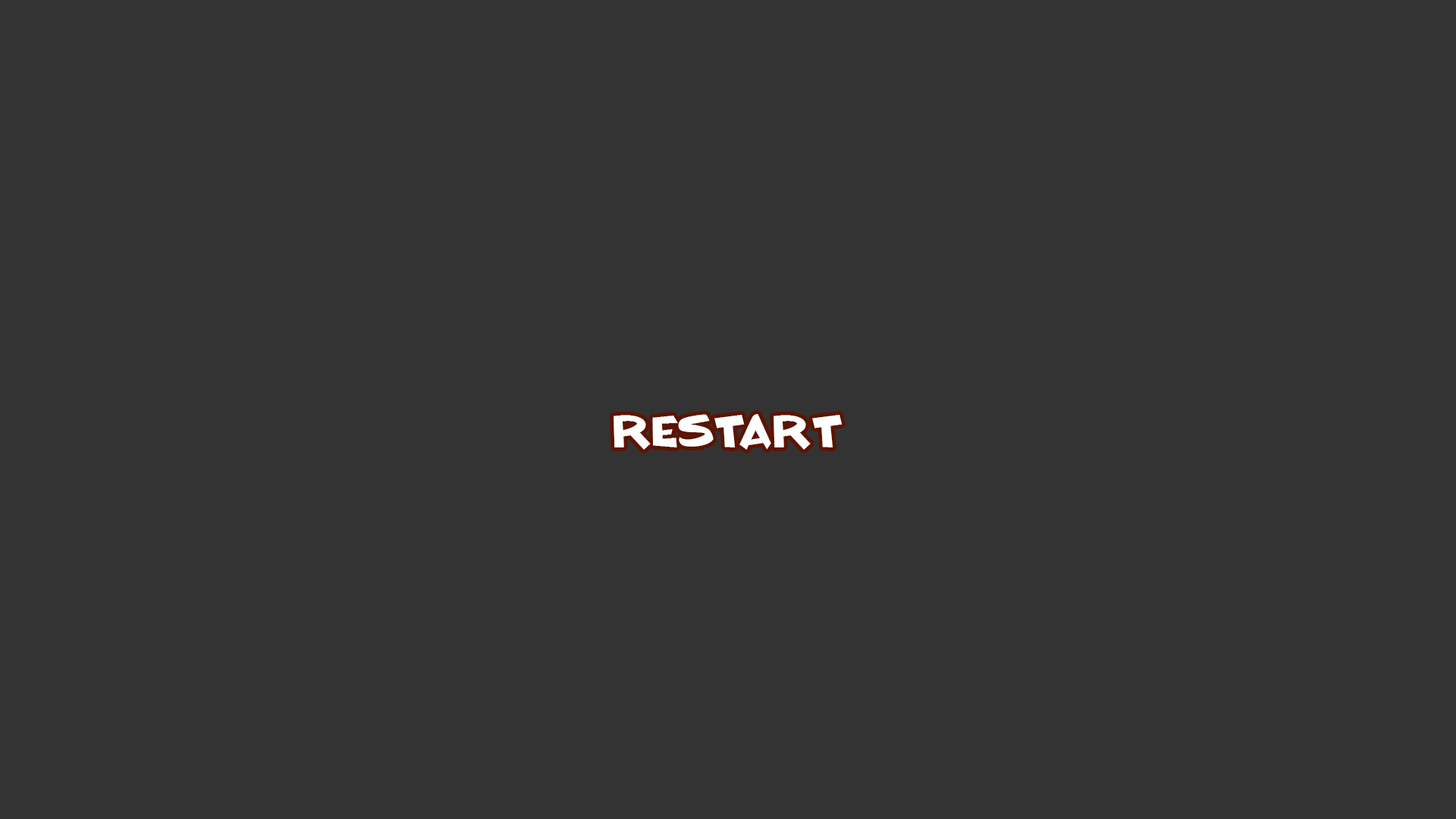
<style>
.page{position:relative;width:1456px;height:819px;background:#333333}
.page>*{position:absolute;margin:0}
.t1{font:50.6px "BLOCKHEADDUDEPersonalUse";color:#ffffff}
</style>
<div class="page">
<p class="t1" style="left:613px;top:414px;width:229px;height:36px">RESTART</p>
</div>
